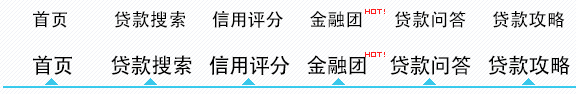
<style>
.page{position:relative;width:576px;height:94px}
.page>*{position:absolute;margin:0}
.t1{font:18px "AdobeHeitiStd-Regular";letter-spacing:0.05em;color:#000000}
.t2{font:21px "AdobeHeitiStd-Regular";letter-spacing:0.02em;color:#000000}
</style>
<div class="page">
<p class="t1" style="left:33px;top:11px;width:532px;height:17px">首页         贷款搜索     信用评分     金融团      贷款问答     贷款攻略</p>
<p class="t2" style="left:33px;top:55px;width:537px;height:20px">首页       贷款搜索   信用评分   金融团    贷款问答   贷款攻略</p>
</div>
